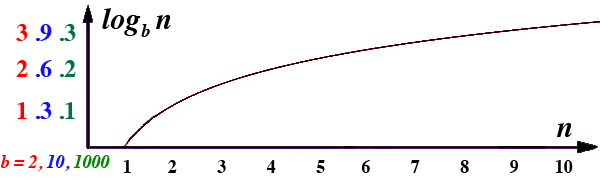
<style>
.page{position:relative;width:600px;height:180px;background:#ffffff}
.page>*{position:absolute;margin:0}
.t1{font:30px "Times-BoldItalic";color:#000000}
.t2{font:24px "Times-Bold";color:#1010ff}
.t3{font:24px "Times-Bold";color:#ff0000}
.t4{font:24px "Times-Bold";color:#00723e}
.t5{font:18px "Times-BoldItalic";color:#000000}
.t6{font:18px "Times-BoldItalic";color:#ff0000}
.t7{font:18px "Times-BoldItalic";color:#1010ff}
.t8{font:18px "Times-BoldItalic";color:#008500}
.t9{font:18px "Times-Bold";color:#000000}
</style>
<div class="page">
<p class="t1" style="left:102px;top:8px;width:69px;height:28px">log  n</p>
<p class="t2" style="left:16px;top:24px;width:60px;height:17px"><span class="t3">3 </span>.9 <span class="t4">.3</span></p>
<p class="t5" style="left:141px;top:24px;width:9px;height:13px">b</p>
<p class="t2" style="left:16px;top:60px;width:60px;height:17px"><span class="t3">2 </span>.6 <span class="t4">.2</span></p>
<p class="t2" style="left:17px;top:102px;width:58px;height:17px"><span class="t3">1 </span>.3 <span class="t4">.1</span></p>
<p class="t1" style="left:557px;top:123px;width:15px;height:14px">n</p>
<p class="t6" style="left:1px;top:155px;width:109px;height:16px">b = 2, <span class="t7">10, </span><span class="t8">1000</span></p>
<p class="t9" style="left:123px;top:160px;width:450px;height:13px">1        2         3         4         5        6         7         8         9        10</p>
</div>
